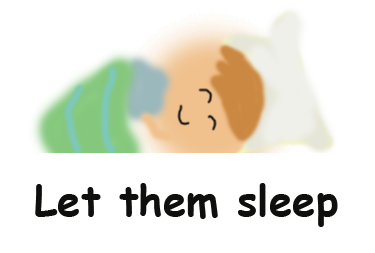
<style>
.page{position:relative;width:375px;height:253px;background:#ffffff}
.page>*{position:absolute;margin:0}
.t1{font:42px "ComicSansMS-Bold";color:#0f0f0e}
</style>
<div class="page">
<p class="t1" style="left:35px;top:183px;width:303px;height:44px">Let them sleep</p>
</div>
